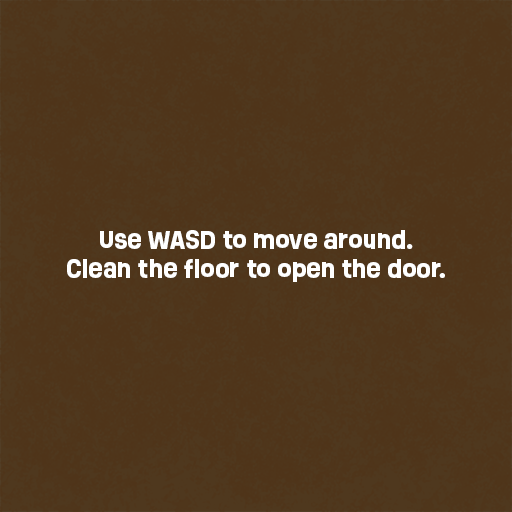
<style>
.page{position:relative;width:512px;height:512px;background:#4f351a}
.page>*{position:absolute;margin:0}
.t1{font:24px "Ruddy-Bold";color:#ffffff}
</style>
<div class="page">
<p class="t1" style="left:67px;top:230px;width:378px;height:52px;text-align:center">Use WASD to move around.<br>Clean the floor to open the door.</p>
</div>
